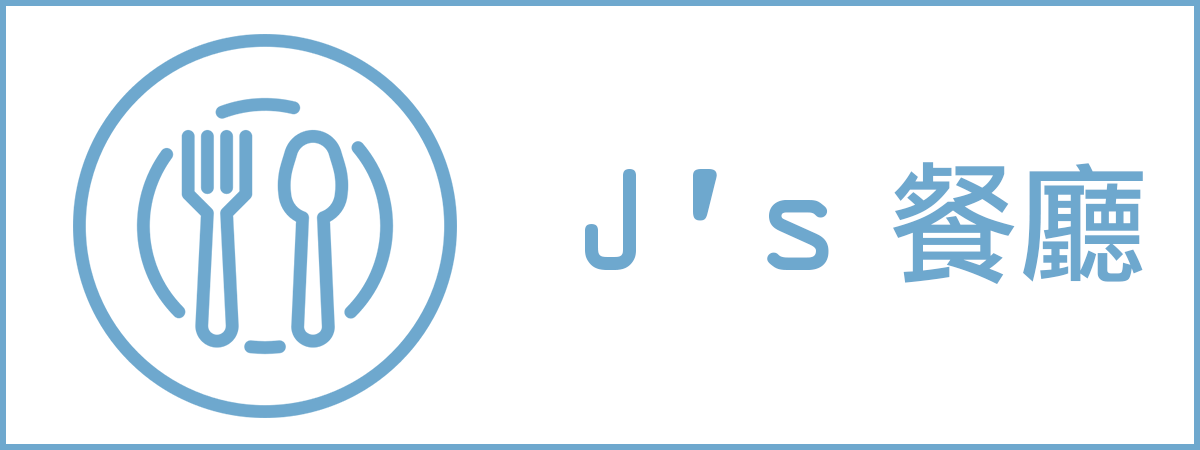
<style>
.page{position:relative;width:1200px;height:450px;background:#ffffff}
.page>*{position:absolute;margin:0}
.t1{font:130px "OCRAStd";color:#6ea8ce}
.t2{font:130px "DFLiHeiStd-W5";color:#6ea8ce}
</style>
<div class="page">
<p class="t1" style="left:585px;top:162px;width:558px;height:123px">J’s<span class="t2"> 餐廳</span></p>
</div>
